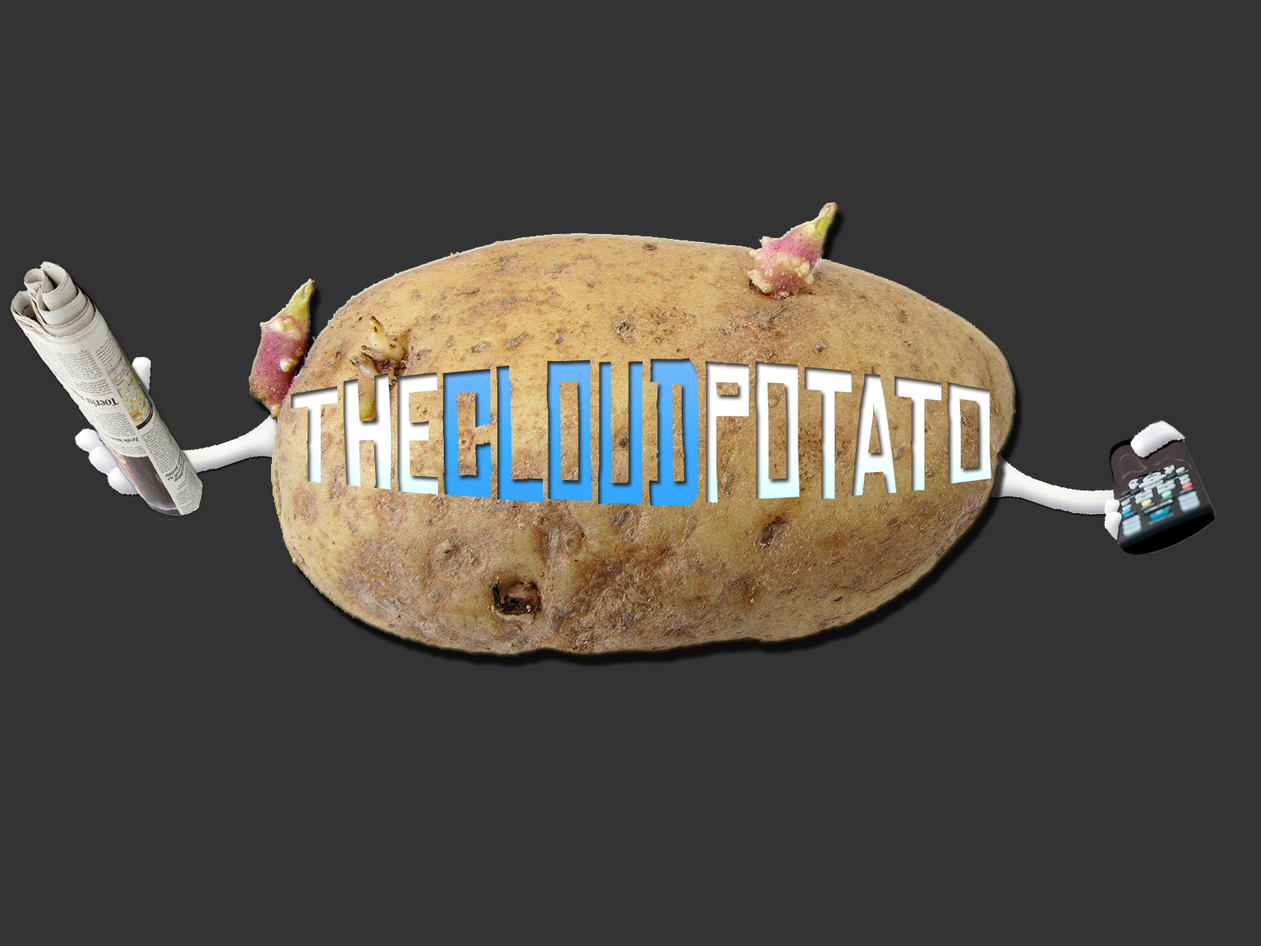
<style>
.page{position:relative;width:1261px;height:946px;background:#333333}
.page>*{position:absolute;margin:0}
.t1{font:111.9px "ChineseRocksRg-Regular";letter-spacing:0.01em}
</style>
<div class="page">
<p class="t1" style="left:291px;top:358px;width:700px;height:147px">THECLOUDPOTATO</p>
</div>
